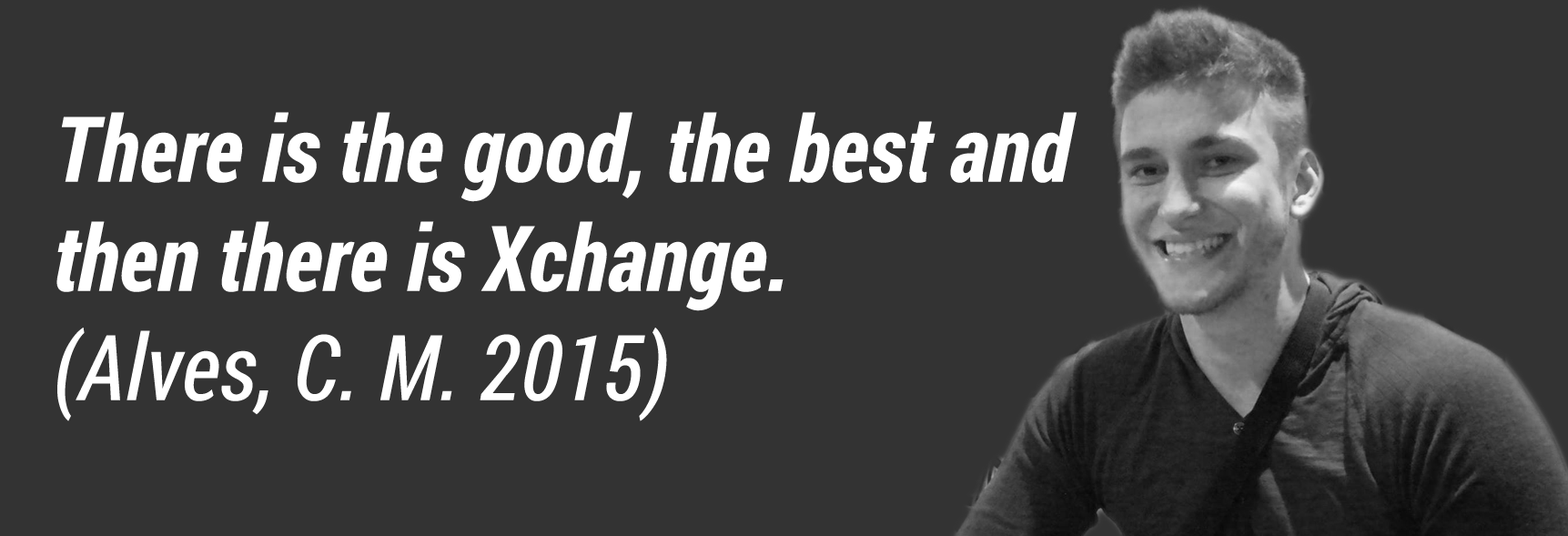
<style>
.page{position:relative;width:1568px;height:536px;background:#333333}
.page>*{position:absolute;margin:0}
.t1{font:91px "RobotoCondensed-BoldItalic";color:#ffffff}
.t2{font:91px "RobotoCondensed-Italic";color:#ffffff}
</style>
<div class="page">
<p class="t1" style="left:56px;top:112px;width:1021px;height:309px">There is the good, the best and<br>then there is Xchange.<br><span class="t2">(Alves, C. M. 2015)</span></p>
</div>
